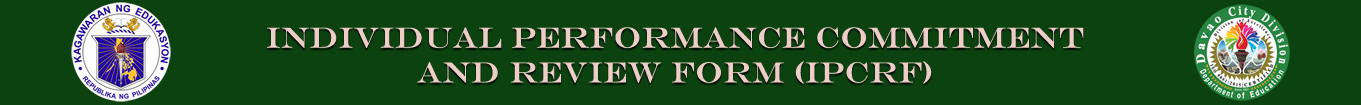
<style>
.page{position:relative;width:1361px;height:105px;background:#0c4110}
.page>*{position:absolute;margin:0}
.t1{font:29px "EngraversMT";letter-spacing:0.005em;color:#edcec7}
</style>
<div class="page">
<p class="t1" style="left:267px;top:27px;width:817px;height:57px;text-align:center">INDIVIDUAL PERFORMANCE COMMITMENT <br>AND REVIEW FORM (IPCRF)</p>
</div>
